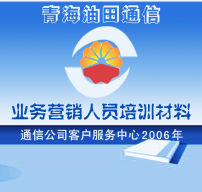
<style>
.page{position:relative;width:202px;height:192px}
.page>*{position:absolute;margin:0}
.t1{font:20px "HYt4gj";color:#ebf3fb}
.t2{font:18px "FZSZJW--GB1-0";color:#064cb3}
.t3{font:12px "SimHei";color:#ebf3fb}
.t4{font:12px "SimHei";letter-spacing:-0.1em;color:#ebf3fb}
.t5{font:12px "SimHei";letter-spacing:0.1em;color:#ebf3fb}
</style>
<div class="page">
<p class="t1" style="left:42px;top:4px;width:119px;height:20px">青海油田通信</p>
<p class="t2" style="left:11px;top:103px;width:180px;height:17px">业务营销人员培训材料</p>
<p class="t3" style="left:20px;top:129px;width:163px;height:12px">通信公司客户服务中<span class="t4">心</span><span class="t5">200</span><span class="t4">6年</span></p>
</div>
